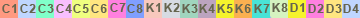
<style>
.page{position:relative;width:360px;height:18px}
.page>*{position:absolute;margin:0}
.t1{font:12px "Arial-BoldMT";letter-spacing:0.075em;color:#66654f}
</style>
<div class="page">
<p class="t1" style="left:2px;top:4px;width:15px;height:9px">C1</p>
<p class="t1" style="left:20px;top:4px;width:16px;height:9px">C2</p>
<p class="t1" style="left:38px;top:4px;width:16px;height:9px">C3</p>
<p class="t1" style="left:56px;top:4px;width:16px;height:9px">C4</p>
<p class="t1" style="left:73px;top:4px;width:16px;height:9px">C5</p>
<p class="t1" style="left:91px;top:4px;width:16px;height:9px">C6</p>
<p class="t1" style="left:110px;top:3px;width:16px;height:9px">C7</p>
<p class="t1" style="left:127px;top:4px;width:16px;height:9px">C8</p>
<p class="t1" style="left:146px;top:3px;width:15px;height:9px">K1</p>
<p class="t1" style="left:164px;top:3px;width:16px;height:9px">K2</p>
<p class="t1" style="left:182px;top:4px;width:16px;height:9px">K3</p>
<p class="t1" style="left:199px;top:4px;width:16px;height:9px">K4</p>
<p class="t1" style="left:217px;top:4px;width:16px;height:9px">K5</p>
<p class="t1" style="left:235px;top:4px;width:16px;height:9px">K6</p>
<p class="t1" style="left:254px;top:4px;width:16px;height:9px">K7</p>
<p class="t1" style="left:272px;top:3px;width:16px;height:9px">K8</p>
<p class="t1" style="left:290px;top:3px;width:15px;height:9px">D1</p>
<p class="t1" style="left:308px;top:4px;width:16px;height:9px">D2</p>
<p class="t1" style="left:326px;top:4px;width:16px;height:9px">D3</p>
<p class="t1" style="left:343px;top:4px;width:16px;height:9px">D4</p>
</div>
